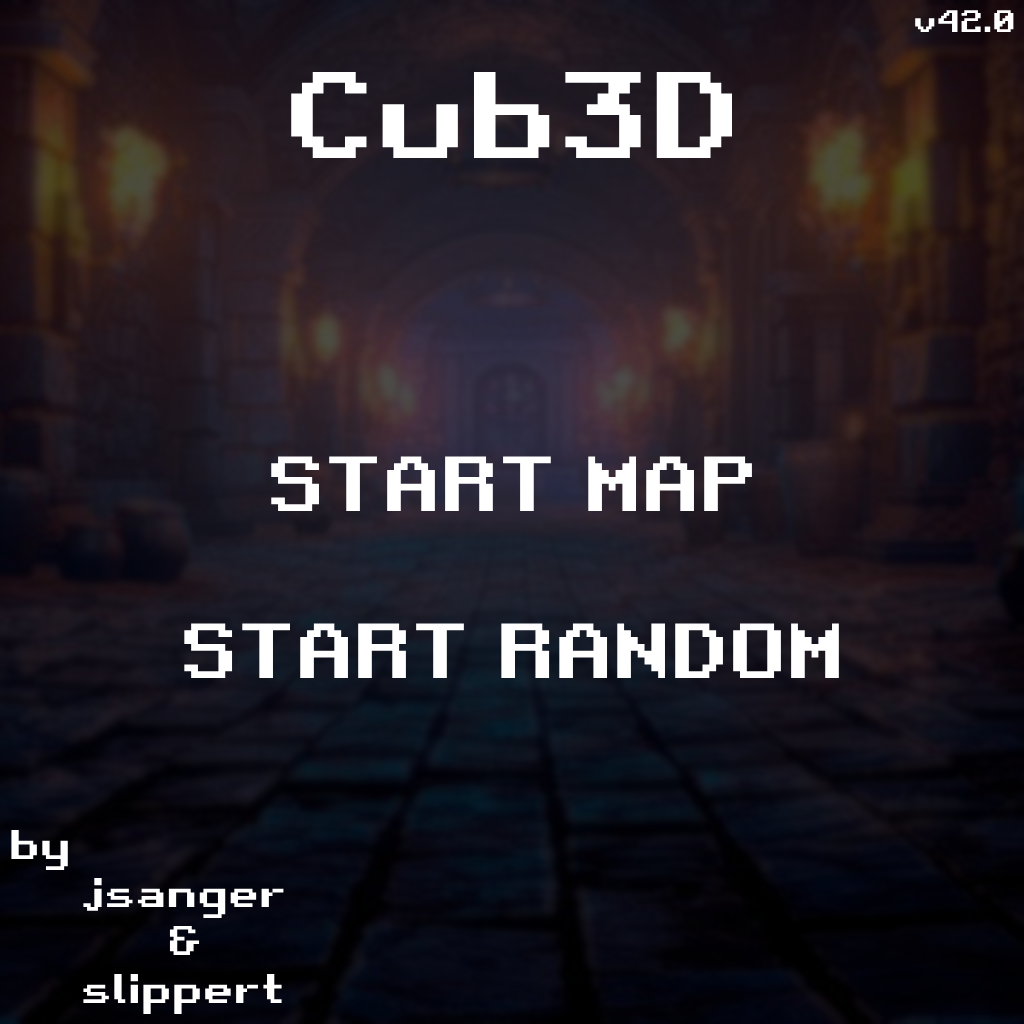
<style>
.page{position:relative;width:1024px;height:1024px}
.page>*{position:absolute;margin:0}
.t1{font:30px "RetroGaming";color:#ffffff}
.t2{font:118.3px "RetroGaming";color:#ffffff}
.t3{font:75px "RetroGaming";color:#ffffff}
.t4{font:40px "RetroGaming";color:#ffffff}
</style>
<div class="page">
<p class="t1" style="left:915px;top:10px;width:99px;height:22px">v42.0</p>
<p class="t2" style="left:291px;top:72px;width:442px;height:86px">Cub3D</p>
<p class="t3" style="left:271px;top:456px;width:481px;height:56px">START MAP</p>
<p class="t3" style="left:184px;top:623px;width:655px;height:56px">START RANDOM</p>
<p class="t4" style="left:11px;top:829px;width:273px;height:185px">by<br>  jsanger<br>     &amp;<br>  slippert</p>
</div>
